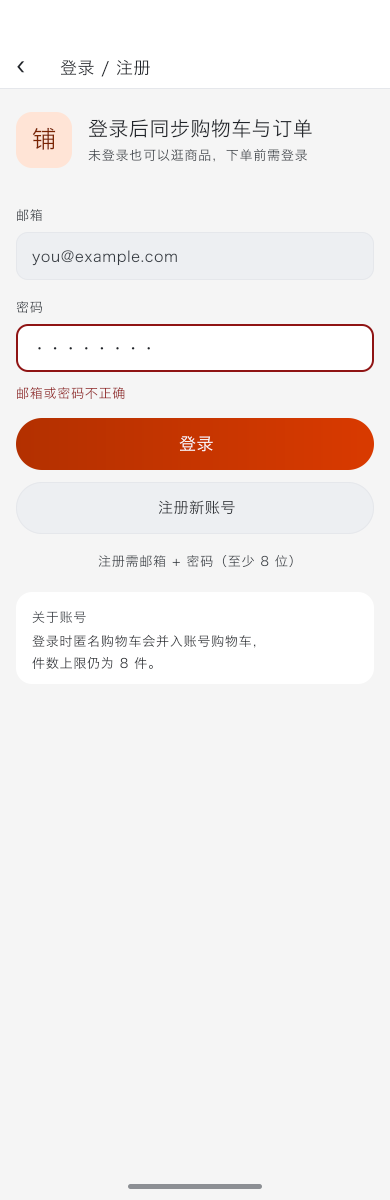
<style>
.page{position:relative;width:390px;height:1200px;background:#f5f5f5}
.page>*{position:absolute;margin:0}
.t1{font:24px "HiraginoSansGB-Regular";letter-spacing:0.022em;color:#1f2329}
.t2{font:17px "HiraginoSansGB-Regular";letter-spacing:0.03em;color:#23272c}
.t3{font:20px "HiraginoSansGB-Regular";letter-spacing:0.024em;color:#1f2329}
.t4{font:24px "HiraginoSansGB-Regular";letter-spacing:0.022em;color:#7a2200}
.t5{font:13px "HiraginoSansGB-Regular";letter-spacing:0.06em;color:#494e53}
.t6{font:13px "HiraginoSansGB-Regular";letter-spacing:0.06em}
.t7{font:15px "HiraginoSansGB-Regular";letter-spacing:0.04em;color:#333940}
.t8{font:13px "HiraginoSansGB-Regular";letter-spacing:0.06em;color:#42464c}
.t9{font:15px "HiraginoSansGB-Regular";letter-spacing:0.04em;color:#1f2329}
.t10{font:13px "HiraginoSansGB-Regular";letter-spacing:0.06em;color:#952a2a}
.t11{font:17px "HiraginoSansGB-Regular";letter-spacing:0.03em;color:#ffffff}
.t12{font:15px "HiraginoSansGB-Regular";letter-spacing:0.04em;color:#2d3136}
.t13{font:13px "HiraginoSansGB-Regular";letter-spacing:0.06em;color:#3f444a}
.t14{font:13px "HiraginoSansGB-Regular";letter-spacing:0.06em;color:#42474d}
.t15{font:13px "HiraginoSansGB-Regular";letter-spacing:0.06em;color:#313439}
.t16{font:13px "HiraginoSansGB-Regular";letter-spacing:0.06em;color:#303438}
</style>
<div class="page">
<p class="t1" style="left:16px;top:61px;width:10px;height:13px">‹</p>
<p class="t2" style="left:59px;top:59px;width:92px;height:19px">登录 / 注册</p>
<p class="t3" style="left:87px;top:119px;width:226px;height:20px">登录后同步购物车与订单</p>
<p class="t4" style="left:31px;top:127px;width:26px;height:24px">铺</p>
<p class="t5" style="left:87px;top:148px;width:222px;height:15px">未登录也可以逛商品，下单前需登录</p>
<p class="t6" style="left:16px;top:209px;width:27px;height:14px">邮箱</p>
<p class="t7" style="left:31px;top:250px;width:147px;height:17px">you@example.com</p>
<p class="t8" style="left:15px;top:301px;width:29px;height:13px">密码</p>
<p class="t9" style="left:37px;top:347px;width:114px;height:4px">••••••••</p>
<p class="t10" style="left:16px;top:387px;width:110px;height:14px">邮箱或密码不正确</p>
<p class="t11" style="left:178px;top:435px;width:36px;height:18px">登录</p>
<p class="t12" style="left:157px;top:500px;width:79px;height:16px">注册新账号</p>
<p class="t13" style="left:97px;top:555px;width:197px;height:14px">注册需邮箱 + 密码（至少 8 位）</p>
<p class="t14" style="left:31px;top:611px;width:56px;height:14px">关于账号</p>
<p class="t15" style="left:31px;top:634px;width:226px;height:15px">登录时匿名购物车会并入账号购物车，</p>
<p class="t16" style="left:31px;top:656px;width:123px;height:14px">件数上限仍为 8 件。</p>
</div>
